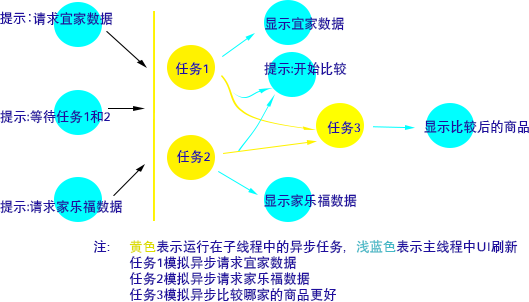
<style>
.page{position:relative;width:529px;height:302px;background:#ffffff}
.page>*{position:absolute;margin:0}
.t1{font:13.3px "SIL-Hei-Med-Jian";color:#1f0e9e}
.t2{font:13.3px "HiraKakuProN-W3";color:#1f0e9e}
.t3{font:13.3px "SIL-Hei-Med-Jian";color:#dcdc00}
.t4{font:13.3px "SIL-Hei-Med-Jian";color:#44b8c6}
</style>
<div class="page">
<p class="t1" style="left:0px;top:11px;width:113px;height:15px"><span class="t2">提示：</span>请求宜家数据</p>
<p class="t1" style="left:265px;top:17px;width:79px;height:14px">显示宜家数据</p>
<p class="t1" style="left:175px;top:62px;width:33px;height:14px">任务1</p>
<p class="t1" style="left:264px;top:62px;width:83px;height:14px">提示:开始比较</p>
<p class="t1" style="left:0px;top:110px;width:110px;height:14px">提示:等待任务1和2</p>
<p class="t1" style="left:327px;top:121px;width:34px;height:14px">任务3</p>
<p class="t1" style="left:424px;top:120px;width:105px;height:14px">显示比较后的商品</p>
<p class="t1" style="left:177px;top:150px;width:33px;height:14px">任务2</p>
<p class="t1" style="left:264px;top:194px;width:93px;height:14px">显示家乐福数据</p>
<p class="t1" style="left:0px;top:200px;width:123px;height:14px">提示:请求家乐福数据</p>
<p class="t1" style="left:93px;top:239px;width:425px;height:63px">注： <span class="t3">黄色</span>表示运行在子线程中的异步任务，<span class="t4">浅蓝色</span>表示主线程中UI刷新<br> 任务1模拟异步请求宜家数据<br> 任务2模拟异步请求家乐福数据<br> 任务3模拟异步比较哪家的商品更好</p>
</div>
